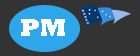
<style>
.page{position:relative;width:140px;height:56px;background:#333333}
.page>*{position:absolute;margin:0}
.t1{font:24px "Rockwell-ExtraBold";color:#ffffff}
</style>
<div class="page">
<p class="t1" style="left:21px;top:19px;width:44px;height:17px">PM</p>
</div>
